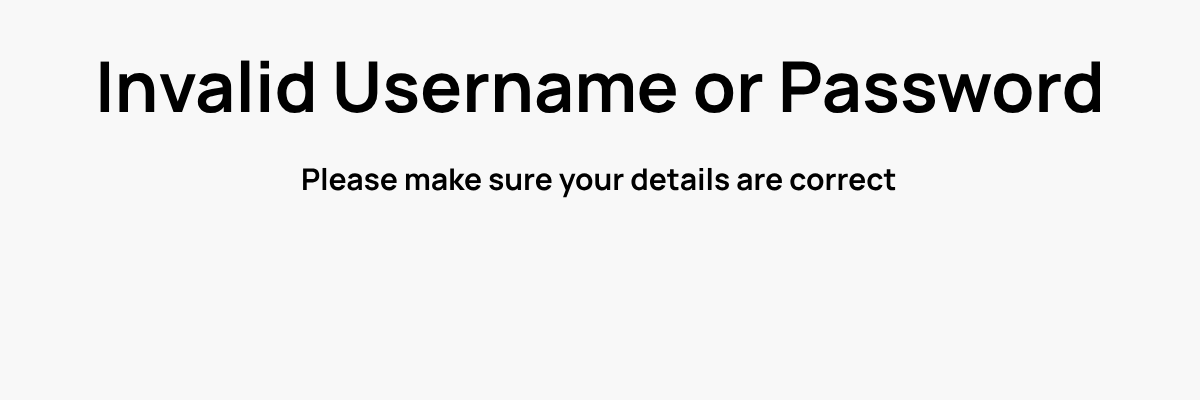
<style>
.page{position:relative;width:1200px;height:400px;background:#f8f8f8}
.page>*{position:absolute;margin:0}
.t1{font:70px "Manrope-Bold";color:#000000}
.t2{font:30px "Manrope-Bold";color:#000000}
</style>
<div class="page">
<p class="t1" style="left:100px;top:60px;width:1000px;height:54px">Invalid Username or Password</p>
<p class="t2" style="left:303px;top:167px;width:593px;height:31px">Please make sure your details are correct</p>
</div>
